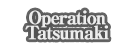
<style>
.page{position:relative;width:135px;height:50px;background:#ffffff}
.page>*{position:absolute;margin:0}
.t1{font:18px/15px "RyuminPro-ExBold";letter-spacing:-0.08em;color:#ededed;font-weight:bold}
</style>
<div class="page">
<p class="t1" style="left:25px;top:10px;width:84px;height:30px;text-align:center">Operation<br>Tatsumaki</p>
</div>
